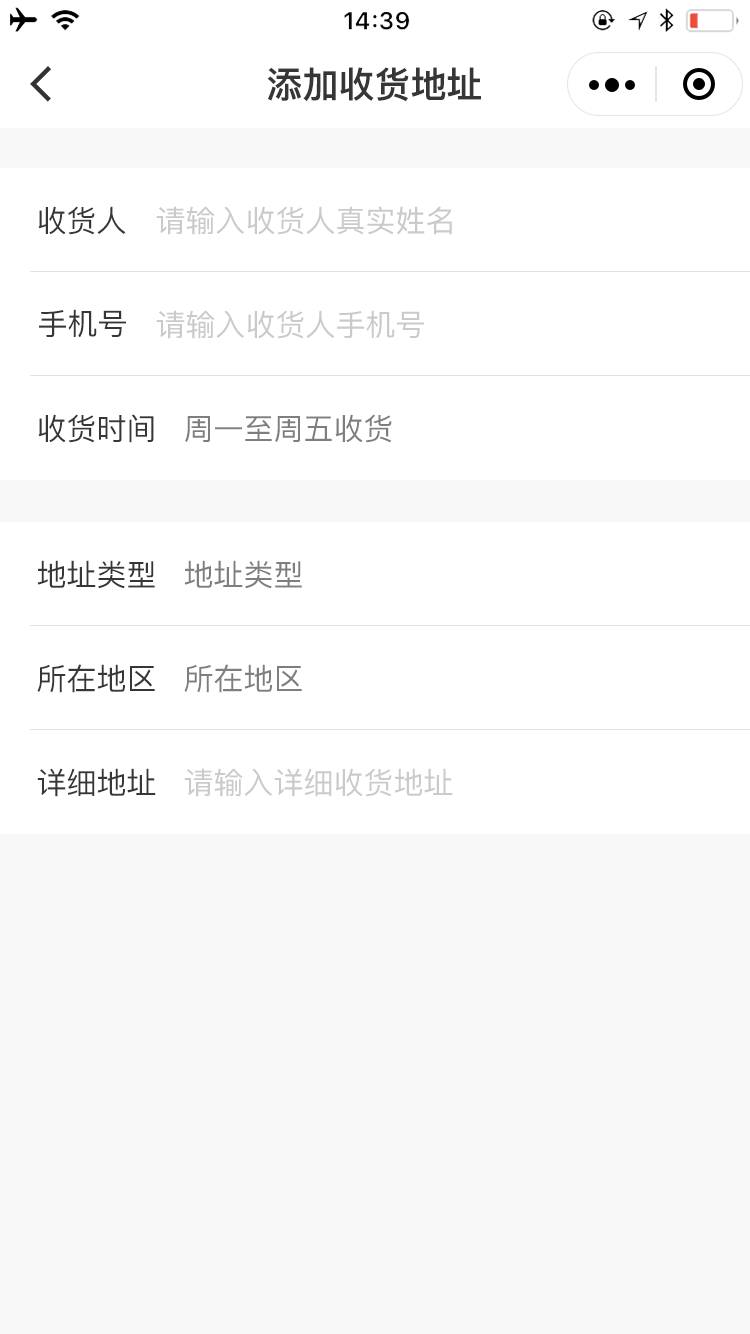
<style>
.page{position:relative;width:750px;height:1334px;background:#ffffff}
.page>*{position:absolute;margin:0}
.t1{font:36px "PingFang-SC-Heavy";color:#363636}
.t2{font:30px "PingFang-SC-Medium";color:#363636}
.t3{font:30px "PingFang-SC-Medium";color:#cacaca}
.t4{font:30px "PingFang-SC-Medium";color:#7e7e7e}
</style>
<div class="page">
<p class="t1" style="left:267px;top:67px;width:214px;height:35px">添加收货地址</p>
<p class="t2" style="left:38px;top:206px;width:88px;height:29px">收货人</p>
<p class="t3" style="left:156px;top:206px;width:296px;height:29px">请输入收货人真实姓名</p>
<p class="t2" style="left:39px;top:309px;width:87px;height:29px">手机号</p>
<p class="t3" style="left:156px;top:310px;width:268px;height:29px">请输入收货人手机号</p>
<p class="t2" style="left:38px;top:414px;width:116px;height:29px">收货时间</p>
<p class="t4" style="left:185px;top:414px;width:207px;height:29px">周一至周五收货</p>
<p class="t2" style="left:37px;top:560px;width:118px;height:29px">地址类型</p>
<p class="t4" style="left:184px;top:560px;width:118px;height:29px">地址类型</p>
<p class="t2" style="left:37px;top:664px;width:118px;height:29px">所在地区</p>
<p class="t4" style="left:184px;top:664px;width:118px;height:29px">所在地区</p>
<p class="t2" style="left:37px;top:768px;width:119px;height:29px">详细地址</p>
<p class="t3" style="left:184px;top:768px;width:269px;height:29px">请输入详细收货地址</p>
</div>
